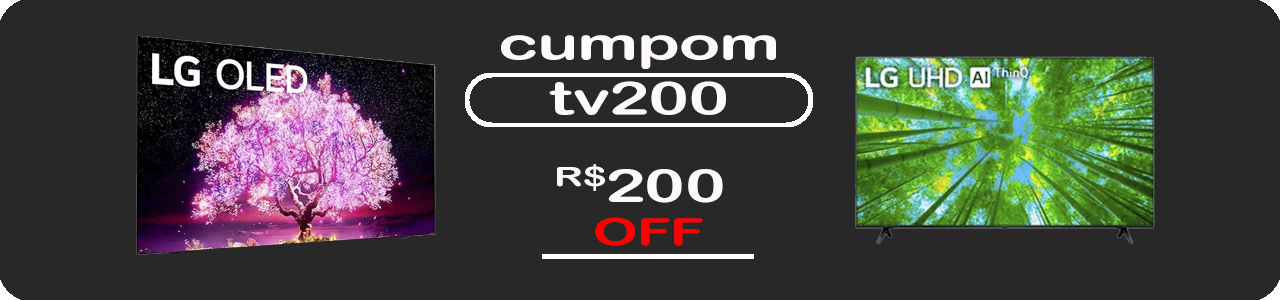
<style>
.page{position:relative;width:1280px;height:300px;background:#282828}
.page>*{position:absolute;margin:0}
.t1{font:45.8px "ArialRoundedMTBold";color:#fffafa;scale:1.5 1}
.t2{font:37.5px "ArialRoundedMTBold";color:#ff0000;scale:1.5 1}
</style>
<div class="page">
<p class="t1" style="left:501px;top:35px;width:275px;height:80px;text-align:center">cumpom<br>tv200</p>
<p class="t1" style="left:557px;top:164px;width:166px;height:39px">R$200</p>
<p class="t2" style="left:595px;top:217px;width:108px;height:29px">OFF</p>
</div>
